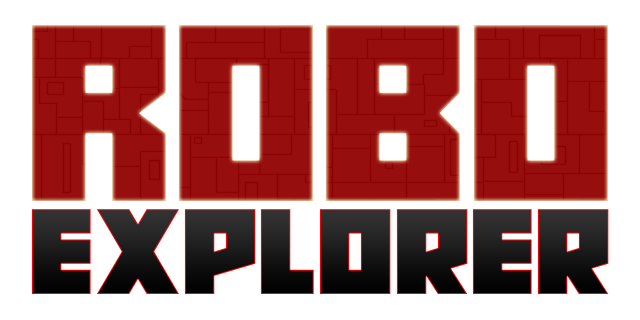
<style>
.page{position:relative;width:640px;height:320px;background:#ffffff}
.page>*{position:absolute;margin:0}
.t1{font:277.5px "RobotCrush";color:#970e0e}
.t2{font:124.4px "RobotRadicals";scale:0.97 1}
</style>
<div class="page">
<p class="t1" style="left:32px;top:25px;width:576px;height:176px">Robo</p>
<p class="t2" style="left:31px;top:209px;width:578px;height:85px">Explorer</p>
</div>
